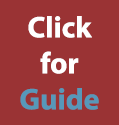
<style>
.page{position:relative;width:119px;height:125px;background:#9a3334}
.page>*{position:absolute;margin:0}
.t1{font:30px "MyriadHebrew-Bold";color:#ffffff}
.t2{font:30px "MyriadHebrew-Bold";color:#5798b9}
</style>
<div class="page">
<p class="t1" style="left:20px;top:16px;width:79px;height:94px;text-align:center">Click <br>for <br><span class="t2">Guide</span></p>
</div>
